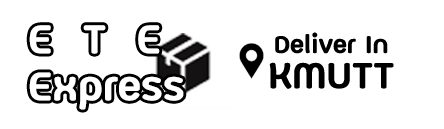
<style>
.page{position:relative;width:444px;height:129px;background:#ffffff}
.page>*{position:absolute;margin:0}
.t1{font:58.8px/47px "FCLamoonBold";color:#ffffff}
.t2{font:35.3px/35.3px "FCLamoonBold";color:#000000}
.t3{font:52.9px/35.3px "FCLamoonBold";color:#000000}
</style>
<div class="page">
<p class="t1" style="left:29px;top:25px;width:155px;height:85px">E  T  E<br>Express</p>
<p class="t2" style="left:269px;top:32px;width:125px;height:57px;text-align:center">Deliver In<br><span class="t3">KMUTT</span></p>
</div>
